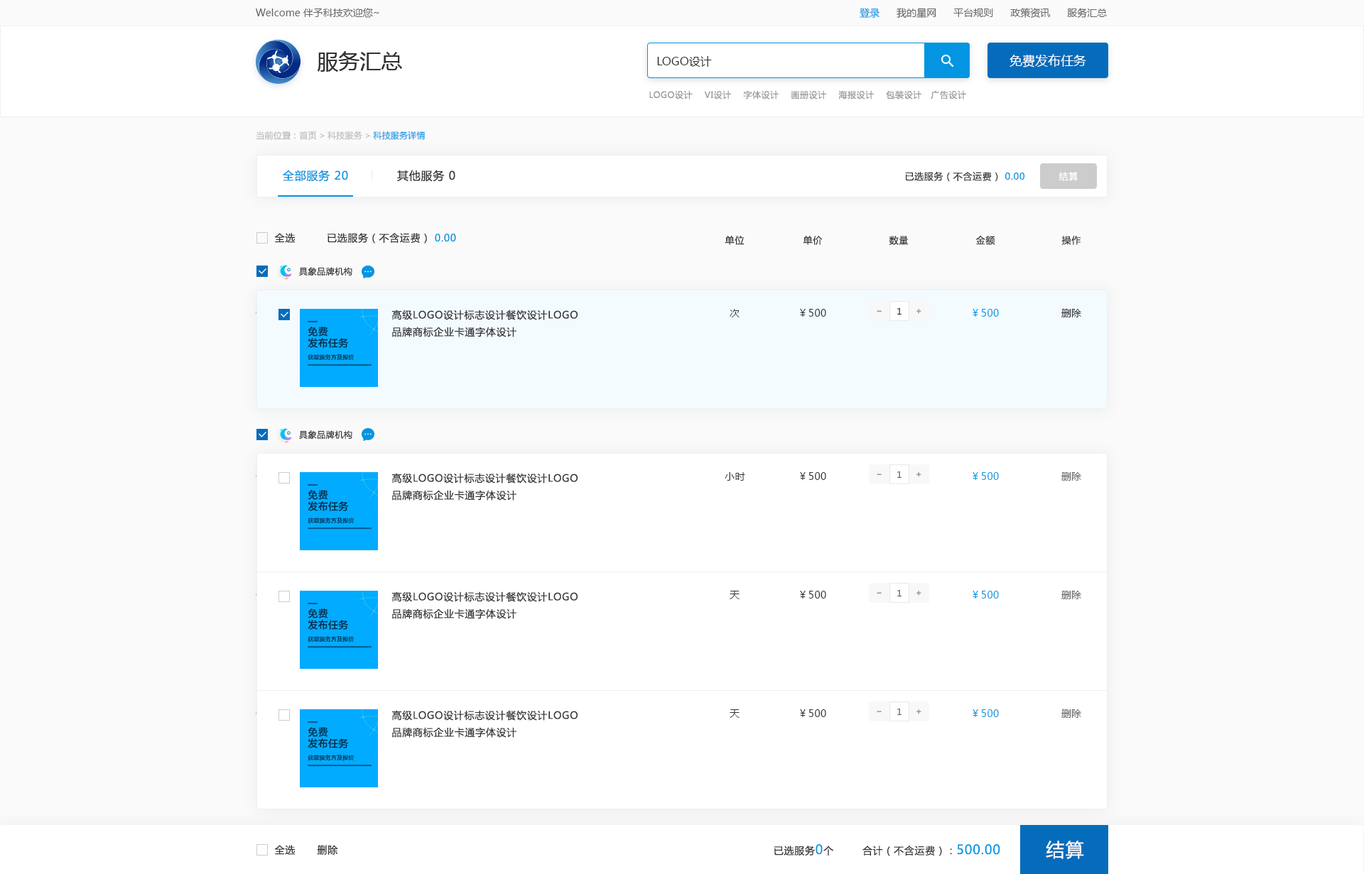
<style>
.page{position:relative;width:1364px;height:874px;background:#ffffff}
.page>*{position:absolute;margin:0}
.t1{font:9.9px "MicrosoftYaHei";color:#666666}
.t2{font:9.9px "MicrosoftYaHei";color:#0395e2}
.t3{font:21.3px "MicrosoftYaHei";color:#333333}
.t4{font:12.8px "MicrosoftYaHei";color:#ffffff;text-transform:uppercase}
.t5{font:11.4px "MicrosoftYaHei";color:#353535;text-transform:uppercase}
.t6{font:8.5px "MicrosoftYaHei";letter-spacing:0.05em;color:#999999;text-transform:uppercase}
.t7{font:8.5px "MicrosoftYaHei";color:#bbbbbb}
.t8{font:8.5px "MicrosoftYaHei";color:#0395e2}
.t9{font:11.4px "MicrosoftYaHei";letter-spacing:0.05em;color:#0395e2;text-transform:uppercase}
.t10{font:11.4px "MicrosoftYaHei";letter-spacing:0.05em;color:#333333;text-transform:uppercase}
.t11{font:9.2px "MicrosoftYaHei";letter-spacing:0.05em;color:#333333;text-transform:uppercase}
.t12{font:9.2px "MicrosoftYaHei";letter-spacing:0.05em;color:#0395e2;text-transform:uppercase}
.t13{font:9.2px "MicrosoftYaHei";letter-spacing:0.05em;color:#ffffff;text-transform:uppercase}
.t14{font:9.9px "MicrosoftYaHei";letter-spacing:0.05em;color:#333333;text-transform:uppercase}
.t15{font:9.9px "MicrosoftYaHei";letter-spacing:0.05em;color:#0395e2;text-transform:uppercase}
.t16{font:8.5px "MicrosoftYaHei";letter-spacing:0.05em;color:#333333;text-transform:uppercase}
.t17{font:9.9px/17px "MicrosoftYaHei";letter-spacing:0.05em;color:#333333;text-transform:uppercase}
.t18{font:8.5px "MicrosoftYaHei";color:#333333}
.t19{font:9.9px "MicrosoftYaHei";color:#333333}
.t20{font:8.5px "MicrosoftYaHei";color:#666666}
.t21{font:12.8px "MicrosoftYaHei";letter-spacing:0.05em;color:#0395e2;text-transform:uppercase}
.t22{font:18.5px "MicrosoftYaHei";letter-spacing:0.05em;color:#ffffff;text-transform:uppercase}
</style>
<div class="page">
<p class="t1" style="left:256px;top:8px;width:123px;height:10px">Welcome 伴予科技欢迎您~</p>
<p class="t1" style="left:859px;top:8px;width:248px;height:10px"><span class="t2">登录 </span>     我的星网      平台规则      政策资讯      服务汇总</p>
<p class="t3" style="left:318px;top:51px;width:84px;height:21px">服务汇总</p>
<p class="t4" style="left:1009px;top:54px;width:77px;height:13px">免费发布任务</p>
<p class="t5" style="left:657px;top:56px;width:55px;height:11px">LOGO设计</p>
<p class="t6" style="left:649px;top:90px;width:317px;height:9px">LOGO设计    VI设计    字体设计    画册设计    海报设计    包装设计   广告设计</p>
<p class="t7" style="left:256px;top:131px;width:169px;height:9px">当前位置：首页 &gt; 科技服务 &gt; <span class="t8">科技服务详情</span></p>
<p class="t9" style="left:283px;top:170px;width:65px;height:12px">全部服务 20</p>
<p class="t10" style="left:397px;top:170px;width:58px;height:12px">其他服务 0</p>
<p class="t11" style="left:905px;top:172px;width:119px;height:10px">已选服务（不含运费） <span class="t12">0.00</span></p>
<p class="t13" style="left:1058px;top:172px;width:20px;height:9px">结算</p>
<p class="t14" style="left:274px;top:233px;width:21px;height:10px">全选</p>
<p class="t14" style="left:327px;top:233px;width:129px;height:11px">已选服务（不含运费） <span class="t15">0.00</span></p>
<p class="t11" style="left:724px;top:236px;width:20px;height:9px">单位</p>
<p class="t11" style="left:803px;top:236px;width:20px;height:9px">单价</p>
<p class="t11" style="left:889px;top:236px;width:19px;height:9px">数量</p>
<p class="t11" style="left:975px;top:236px;width:20px;height:9px">金额</p>
<p class="t11" style="left:1061px;top:236px;width:20px;height:9px">操作</p>
<p class="t16" style="left:299px;top:267px;width:53px;height:9px">具象品牌机构</p>
<p class="t17" style="left:391px;top:310px;width:186px;height:27px">高级logo设计标志设计餐饮设计LOGO<br>品牌商标企业卡通字体设计</p>
<p class="t14" style="left:729px;top:309px;width:10px;height:9px">次</p>
<p class="t14" style="left:800px;top:309px;width:26px;height:8px">￥500</p>
<p class="t18" style="left:897px;top:308px;width:4px;height:7px">1</p>
<p class="t15" style="left:972px;top:309px;width:27px;height:8px">￥500</p>
<p class="t19" style="left:1061px;top:309px;width:20px;height:9px">删除</p>
<p class="t16" style="left:299px;top:430px;width:53px;height:10px">具象品牌机构</p>
<p class="t17" style="left:391px;top:473px;width:186px;height:28px">高级logo设计标志设计餐饮设计LOGO<br>品牌商标企业卡通字体设计</p>
<p class="t14" style="left:724px;top:472px;width:21px;height:9px">小时</p>
<p class="t14" style="left:800px;top:472px;width:26px;height:8px">￥500</p>
<p class="t20" style="left:897px;top:471px;width:4px;height:8px">1</p>
<p class="t15" style="left:972px;top:472px;width:27px;height:8px">￥500</p>
<p class="t1" style="left:1061px;top:472px;width:20px;height:9px">删除</p>
<p class="t17" style="left:391px;top:592px;width:186px;height:27px">高级logo设计标志设计餐饮设计LOGO<br>品牌商标企业卡通字体设计</p>
<p class="t14" style="left:729px;top:591px;width:10px;height:8px">天</p>
<p class="t14" style="left:800px;top:591px;width:26px;height:8px">￥500</p>
<p class="t20" style="left:897px;top:590px;width:4px;height:7px">1</p>
<p class="t15" style="left:972px;top:591px;width:27px;height:8px">￥500</p>
<p class="t1" style="left:1061px;top:591px;width:20px;height:8px">删除</p>
<p class="t17" style="left:391px;top:710px;width:186px;height:28px">高级logo设计标志设计餐饮设计LOGO<br>品牌商标企业卡通字体设计</p>
<p class="t14" style="left:729px;top:710px;width:10px;height:8px">天</p>
<p class="t14" style="left:800px;top:710px;width:26px;height:7px">￥500</p>
<p class="t20" style="left:897px;top:708px;width:4px;height:8px">1</p>
<p class="t15" style="left:972px;top:710px;width:27px;height:7px">￥500</p>
<p class="t1" style="left:1061px;top:710px;width:20px;height:8px">删除</p>
<p class="t14" style="left:274px;top:845px;width:21px;height:10px">全选</p>
<p class="t14" style="left:317px;top:845px;width:21px;height:10px">删除</p>
<p class="t14" style="left:774px;top:845px;width:59px;height:11px">已选服务<span class="t21">0</span>个</p>
<p class="t14" style="left:862px;top:845px;width:138px;height:12px">合计（不含运费）：<span class="t21">500.00</span></p>
<p class="t22" style="left:1046px;top:841px;width:38px;height:18px">结算</p>
</div>
